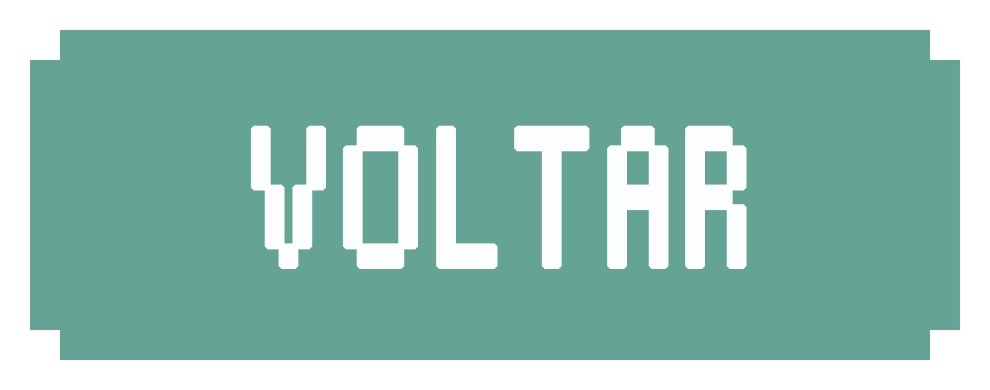
<style>
.page{position:relative;width:990px;height:390px;background:#65a394}
.page>*{position:absolute;margin:0}
.t1{font:255px "Pixelade";letter-spacing:0.025em;color:#fcfefe;font-weight:bold;scale:0.71 1}
</style>
<div class="page">
<p class="t1" style="left:250px;top:125px;width:497px;height:144px">VOLTAR</p>
</div>
